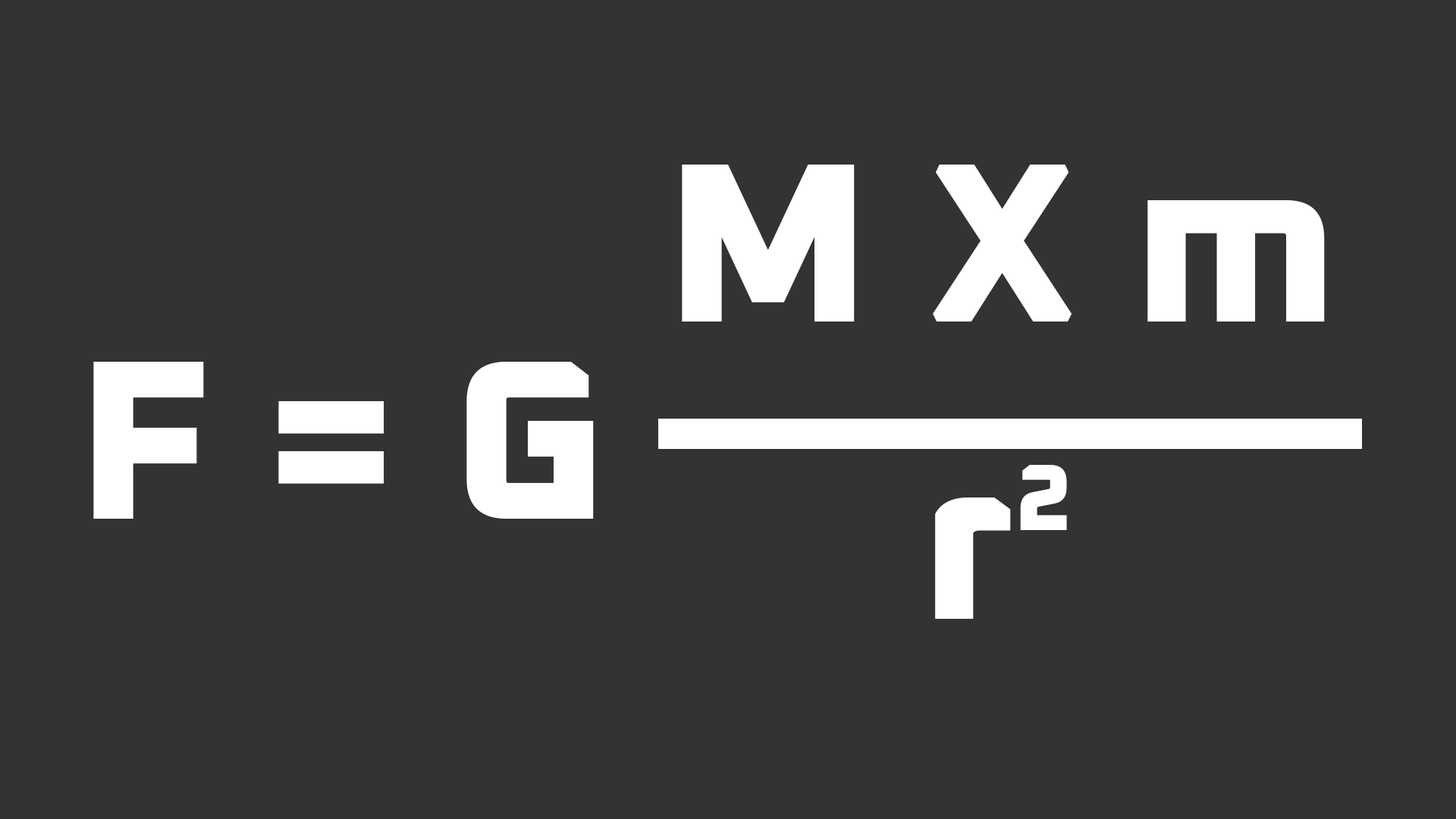
<style>
.page{position:relative;width:1456px;height:819px;background:#333333}
.page>*{position:absolute;margin:0}
.t1{font:227.5px "Oxanium-ExtraBold";color:#ffffff}
.t2{font:94.8px "Oxanium-ExtraBold";color:#ffffff}
</style>
<div class="page">
<p class="t1" style="left:682px;top:165px;width:643px;height:157px">M X m</p>
<p class="t1" style="left:93px;top:362px;width:501px;height:157px">F = G</p>
<p class="t2" style="left:1020px;top:465px;width:47px;height:65px">2</p>
<p class="t1" style="left:935px;top:497px;width:76px;height:122px">r</p>
</div>
